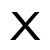
<style>
.page{position:relative;width:50px;height:50px;background:#ffffff}
.page>*{position:absolute;margin:0}
.t1{font:39.5px "ArialMT";color:#000000;scale:1.16 1}
</style>
<div class="page">
<p class="t1" style="left:10px;top:12px;width:31px;height:28px">X</p>
</div>
